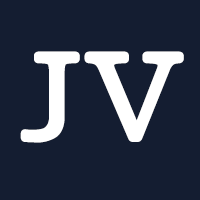
<style>
.page{position:relative;width:200px;height:200px;background:#141d31}
.page>*{position:absolute;margin:0}
.t1{font:130px "AlbionaSoft-Light";color:#ffffff;font-weight:bold}
</style>
<div class="page">
<p class="t1" style="left:20px;top:51px;width:164px;height:92px">JV</p>
</div>
